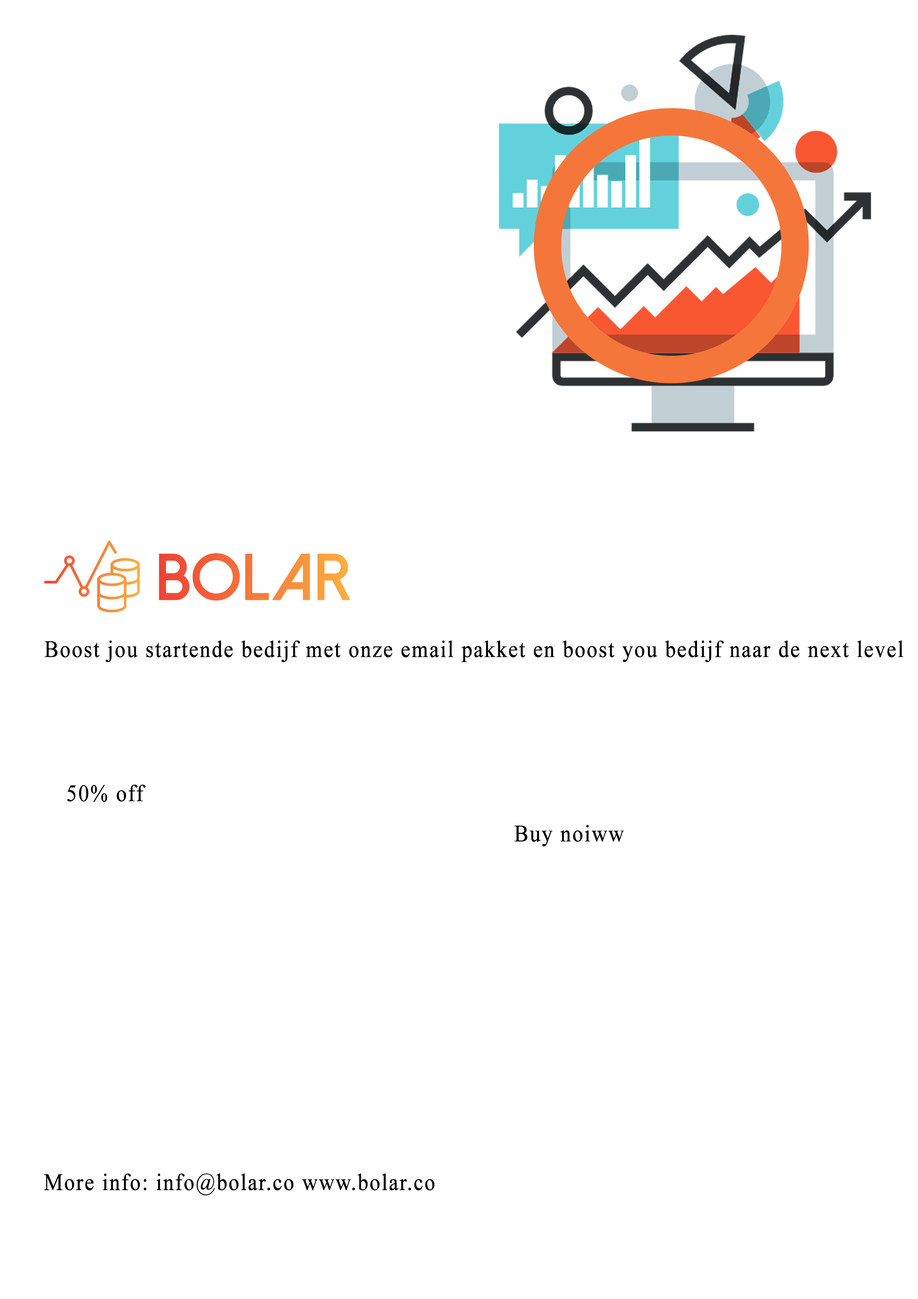
<style>
.page{position:relative;width:918px;height:1299px;background:#ffffff}
.page>*{position:absolute;margin:0}
.t1{font:23.5px "TimesNewRomanPSMT";letter-spacing:0.04em;color:#000000;font-weight:bold;scale:0.9 1}
</style>
<div class="page">
<p class="t1" style="left:44px;top:640px;width:860px;height:22px">Boost jou startende bedijf met onze email pakket en boost you bedijf naar de next level</p>
<p class="t1" style="left:67px;top:784px;width:79px;height:18px">50% off</p>
<p class="t1" style="left:514px;top:824px;width:110px;height:22px">Buy noiww</p>
<p class="t1" style="left:44px;top:1173px;width:391px;height:22px">More info: info@bolar.co www.bolar.co</p>
</div>
